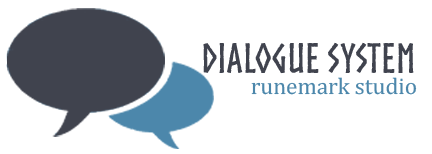
<style>
.page{position:relative;width:432px;height:154px;background:#ffffff}
.page>*{position:absolute;margin:0}
.t1{font:39.6px "Norse-Bold";color:#40434e}
.t2{font:23.1px "Cambria";color:#4c87ab}
</style>
<div class="page">
<p class="t1" style="left:203px;top:42px;width:211px;height:32px">Dialogue System</p>
<p class="t2" style="left:251px;top:77px;width:166px;height:18px">runemark studio</p>
</div>
